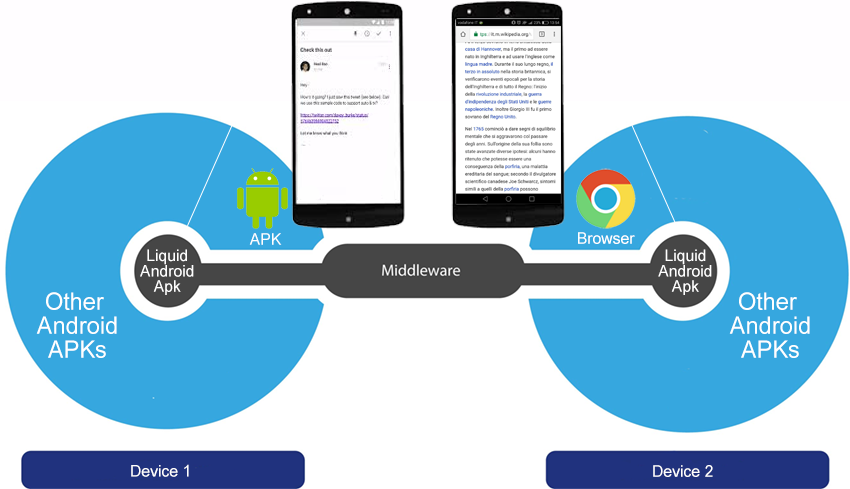
<style>
.page{position:relative;width:850px;height:489px;background:#ffffff}
.page>*{position:absolute;margin:0}
.t1{font:16px "ArialNarrow";color:#ffffff;scale:1.2 1}
.t2{font:16px/15.4px "ArialNarrow";color:#ffffff;scale:1.2 1}
.t3{font:24px/24px "ArialNarrow";color:#ffffff;scale:1.2 1}
</style>
<div class="page">
<p class="t1" style="left:249px;top:233px;width:33px;height:12px">APK</p>
<p class="t1" style="left:578px;top:232px;width:57px;height:12px">Browser</p>
<p class="t2" style="left:140px;top:249px;width:54px;height:46px;text-align:center">Liquid<br>Android<br>Apk</p>
<p class="t2" style="left:658px;top:249px;width:54px;height:46px;text-align:center">Liquid<br>Android<br>Apk</p>
<p class="t3" style="left:36px;top:292px;width:81px;height:66px;text-align:center">Other <br>Android<br>APKs</p>
<p class="t3" style="left:729px;top:292px;width:81px;height:66px;text-align:center">Other <br>Android<br>APKs</p>
<p class="t1" style="left:131px;top:464px;width:58px;height:13px">Device 1</p>
<p class="t1" style="left:653px;top:465px;width:60px;height:12px">Device 2</p>
</div>
